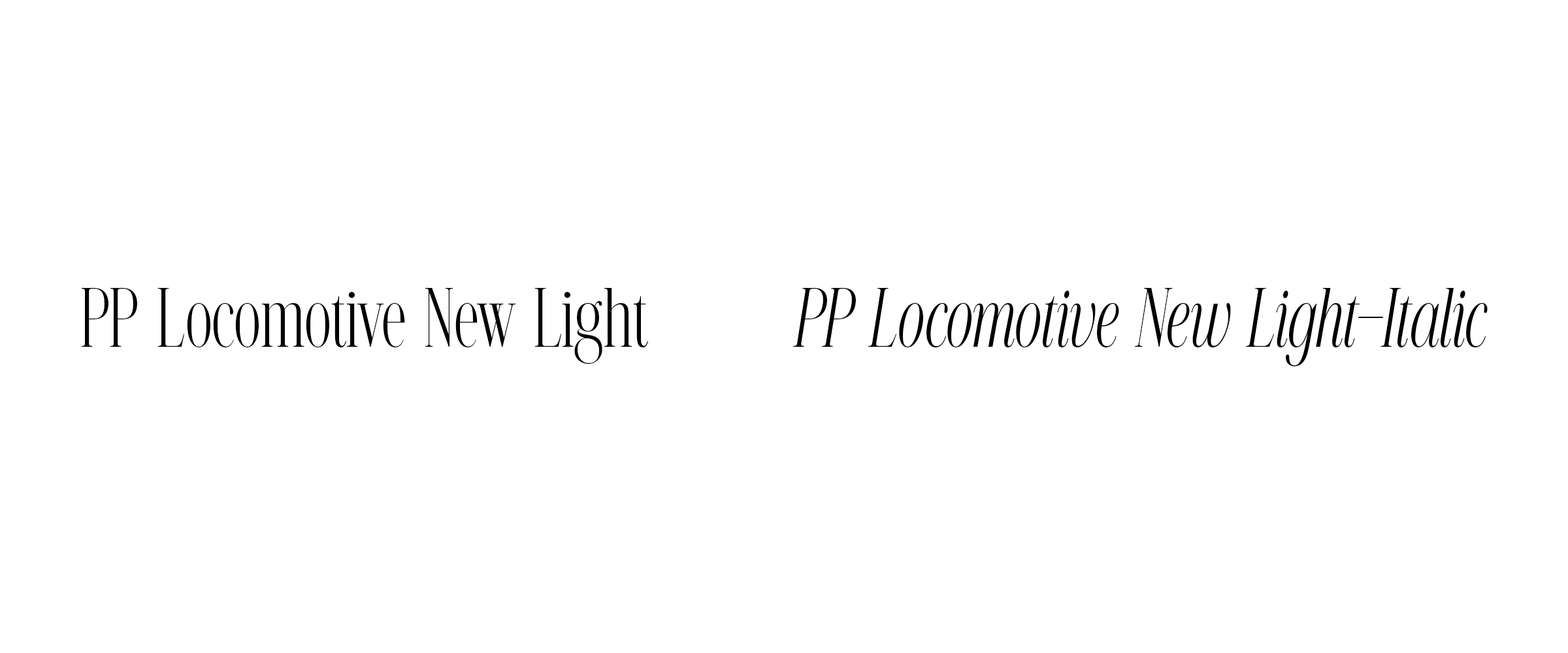
<style>
.page{position:relative;width:1568px;height:653px;background:#ffffff}
.page>*{position:absolute;margin:0}
.t1{font:84.1px "NTVALENTINO";color:#000000}
.t2{font:84.1px "NTVALENTINO-Italic";color:#000000}
</style>
<div class="page">
<p class="t1" style="left:81px;top:287px;width:568px;height:78px">PP Locomotive New Light</p>
<p class="t2" style="left:793px;top:287px;width:695px;height:80px">PP Locomotive New Light-Italic</p>
</div>
